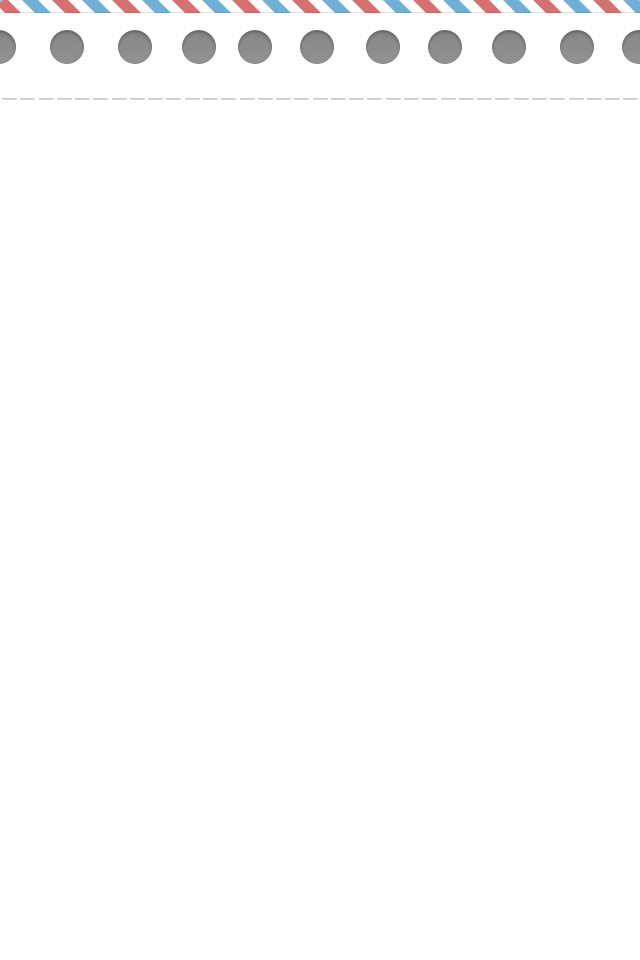
<style>
.page{position:relative;width:640px;height:960px;background:#ffffff}
.page>*{position:absolute;margin:0}
.t1{font:24px "AdobeHeitiStd-Regular";color:#cccccc;scale:2.22 1}
</style>
<div class="page">
<p class="t1" style="left:2px;top:98px;width:636px;height:2px">-----------------------------------</p>
</div>
